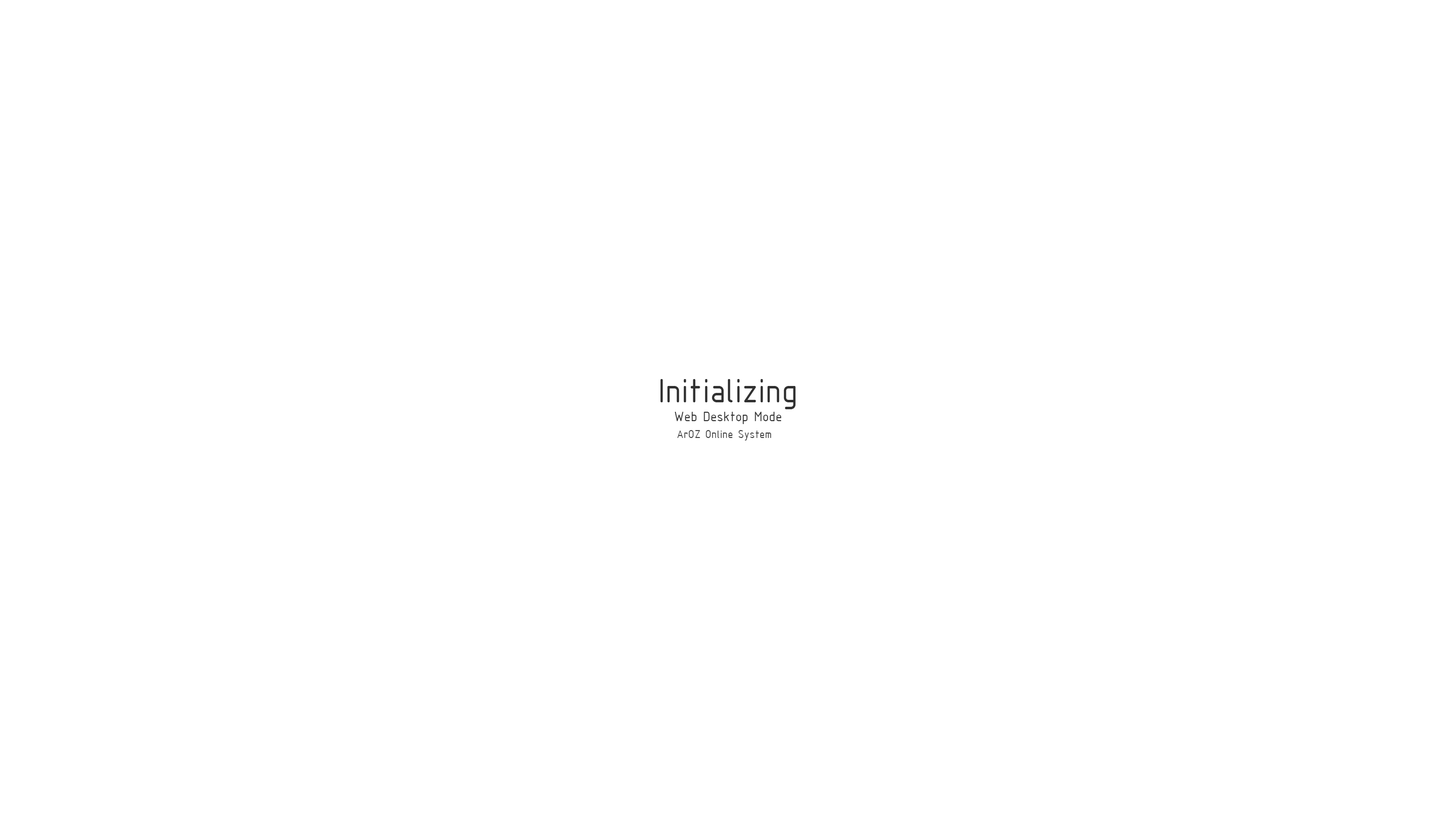
<style>
.page{position:relative;width:1456px;height:819px;background:#ffffff}
.page>*{position:absolute;margin:0}
.t1{font:36.1px "ISOCPEUR";color:#313131}
.t2{font:14.4px "ISOCPEUR";color:#313131}
.t3{font:12px "ISOCPEUR";color:#434343}
</style>
<div class="page">
<p class="t1" style="left:660px;top:379px;width:136px;height:30px">Initializing</p>
<p class="t2" style="left:674px;top:412px;width:107px;height:12px">Web Desktop Mode</p>
<p class="t3" style="left:677px;top:430px;width:94px;height:11px">ArOZ Online System</p>
</div>
